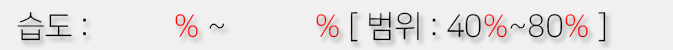
<style>
.page{position:relative;width:673px;height:50px;background:#f0f0f0}
.page>*{position:absolute;margin:0}
.t1{font:31px "NanumSquareL";color:#000000}
.t2{font:31px "NanumSquareL";color:#ff0000}
.t3{font:31px "NanumSquareL"}
</style>
<div class="page">
<p class="t1" style="left:17px;top:12px;width:208px;height:29px">습도 : <span class="t2">          % </span>~</p>
<p class="t3" style="left:316px;top:11px;width:290px;height:31px">% [ 범위 : 40%~80% ]</p>
</div>
